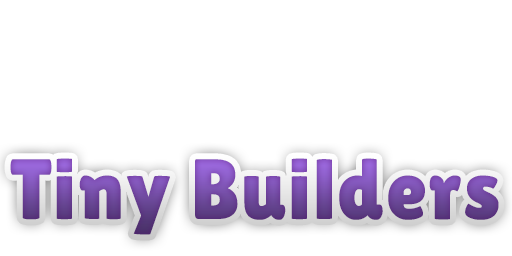
<style>
.page{position:relative;width:512px;height:256px;background:#ffffff}
.page>*{position:absolute;margin:0}
.t1{font:85.4px "LilitaOne";letter-spacing:0.02em}
</style>
<div class="page">
<p class="t1" style="left:10px;top:158px;width:489px;height:77px">Tiny Builders</p>
</div>
